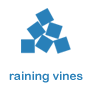
<style>
.page{position:relative;width:90px;height:90px;background:#ffffff}
.page>*{position:absolute;margin:0}
.t1{font:12px "ArialRoundedMTBold";color:#2980b9}
</style>
<div class="page">
<p class="t1" style="left:9px;top:71px;width:74px;height:12px">raining vines</p>
</div>
